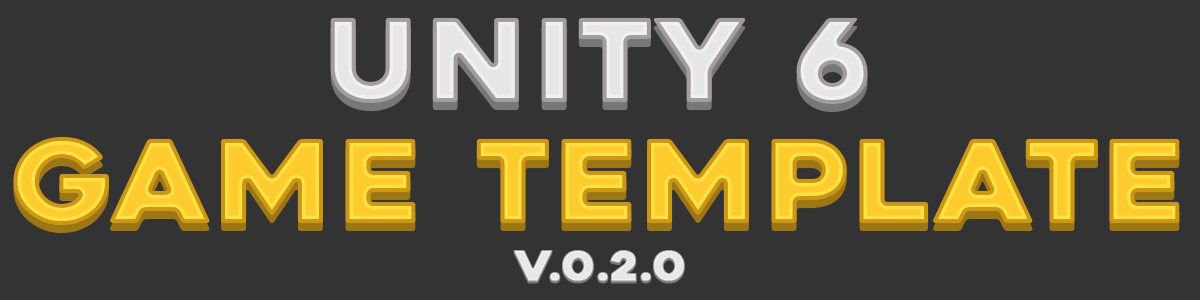
<style>
.page{position:relative;width:1200px;height:300px;background:#333333}
.page>*{position:absolute;margin:0}
.t1{font:115.3px "Heavitas";color:#e8e8e8;font-weight:bold;scale:1.08 1}
.t2{font:115.3px "Heavitas";color:#ffcc30;font-weight:bold;scale:1.08 1}
.t3{font:43.1px "Heavitas";color:#e8e8e8;font-weight:bold;scale:1.07 1}
</style>
<div class="page">
<p class="t1" style="left:330px;top:17px;width:538px;height:88px">unity 6</p>
<p class="t2" style="left:13px;top:136px;width:1167px;height:90px">GAME template</p>
<p class="t3" style="left:513px;top:250px;width:172px;height:32px">v.0.2.0</p>
</div>
